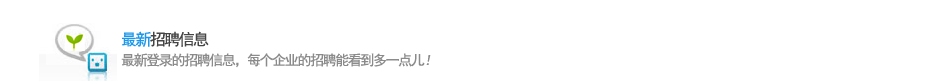
<style>
.page{position:relative;width:950px;height:81px;background:#ffffff}
.page>*{position:absolute;margin:0}
.t1{font:16px "SimHei";letter-spacing:-0.1em;color:#454545}
.t2{font:16px "SimHei";letter-spacing:-0.1em;color:#1b97eb}
.t3{font:14px "SimHei";letter-spacing:-0.1em;color:#8b8b8b}
.t4{font:14px "SimHei";letter-spacing:-0.1em;color:#8b8b8b;font-style:italic}
</style>
<div class="page">
<p class="t1" style="left:122px;top:31px;width:87px;height:16px"><span class="t2">最新</span>招聘信息</p>
<p class="t3" style="left:121px;top:53px;width:310px;height:15px">最新登录的招聘信息，每个企业的招聘能看到多一点儿<span class="t4">！</span></p>
</div>
